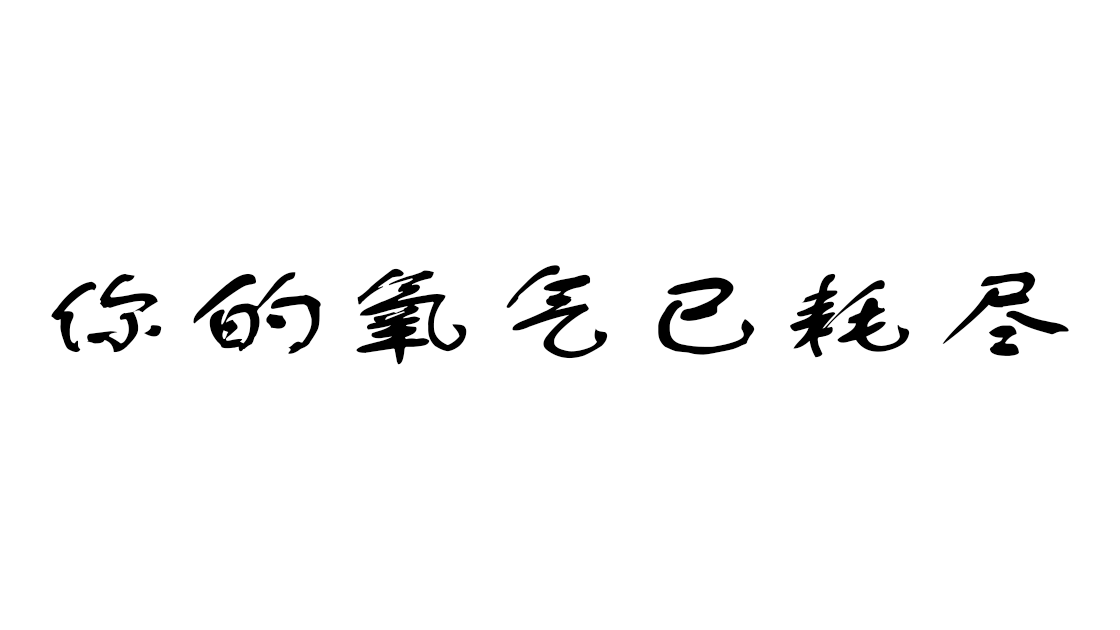
<style>
.page{position:relative;width:1120px;height:630px;background:#ffffff}
.page>*{position:absolute;margin:0}
.t1{font:111.2px "FZSTK--GBK1-0";color:#000000;scale:1.33 1}
</style>
<div class="page">
<p class="t1" style="left:51px;top:265px;width:1018px;height:100px">你的氧气已耗尽</p>
</div>
